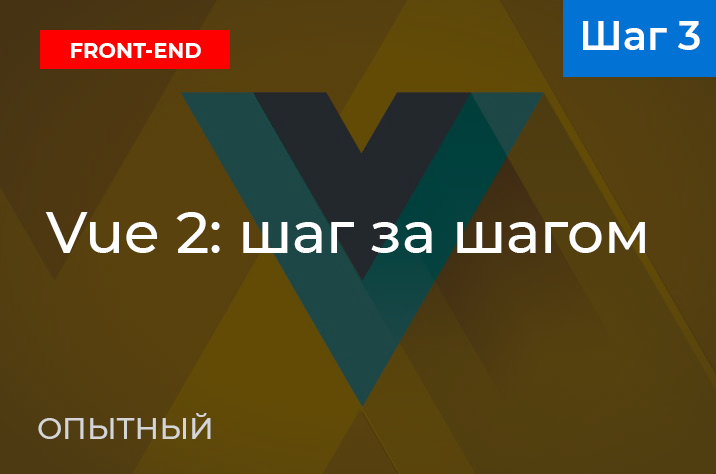
<style>
.page{position:relative;width:716px;height:474px}
.page>*{position:absolute;margin:0}
.t1{font:40px "Montserrat-SemiBold";color:#ffffff}
.t2{font:22px "Montserrat-Bold";color:#ffffff;scale:0.95 1}
.t3{font:58px "Montserrat-Medium";color:#ffffff}
.t4{font:30px "Montserrat-Medium";color:#d5d5d5}
</style>
<div class="page">
<p class="t1" style="left:583px;top:21px;width:117px;height:29px">Шаг 3</p>
<p class="t2" style="left:71px;top:43px;width:130px;height:15px">FRONT-END</p>
<p class="t3" style="left:45px;top:212px;width:600px;height:41px">Vue 2: шаг за шагом</p>
<p class="t4" style="left:38px;top:413px;width:173px;height:26px">ОПЫТНЫЙ</p>
</div>
